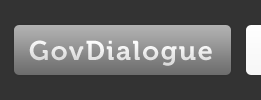
<style>
.page{position:relative;width:261px;height:100px;background:#333333}
.page>*{position:absolute;margin:0}
.t1{font:27px "Museo-700";letter-spacing:0.06em;color:#fefefe}
.t2{font:27px "Museo-700";letter-spacing:0.06em;color:#f6f6f6}
</style>
<div class="page">
<p class="t1" style="left:29px;top:40px;width:183px;height:26px"><span class="t2">Gov</span>Dialogue</p>
</div>
